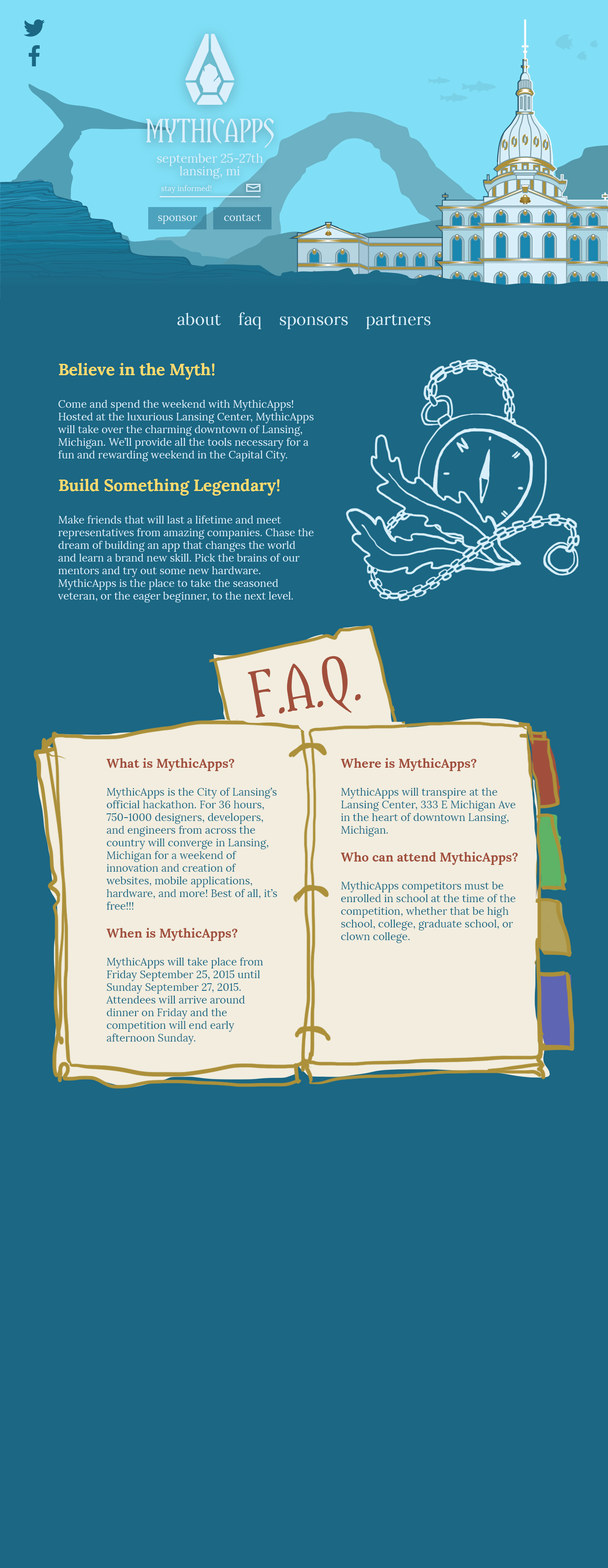
<style>
.page{position:relative;width:608px;height:1568px;background:#1b6784}
.page>*{position:absolute;margin:0}
.t1{font:12.2px/20.7px "Lora-Regular";color:#dcf0fb}
.t2{font:24.3px/20.7px "Yataghan-Regular";color:#dcf0fb}
.t3{font:12.2px/12.8px "Lora-Regular";color:#dcf0fb}
.t4{font:7.6px "Lora-Regular";color:#dcf0fb}
.t5{font:10.6px "Lora-Regular";color:#dcf0fb}
.t6{font:16.5px "Lora-Regular";color:#dcf0fb}
.t7{font:16.5px "Lora-Bold";color:#ffdb6d}
.t8{font:48.6px "Yataghan-Regular";color:#a14f3c}
.t9{font:10.6px "Lora-Regular";color:#1b6784}
.t10{font:12.7px "Lora-Bold";color:#a14f3c}
</style>
<div class="page">
<p class="t1" style="left:146px;top:118px;width:128px;height:61px;text-align:center"><span class="t2">MYTHICAPPS<br></span>september 25-27th<br><span class="t3">lansing, mi</span></p>
<p class="t4" style="left:161px;top:185px;width:51px;height:8px">stay informed!</p>
<p class="t5" style="left:158px;top:215px;width:39px;height:9px">sponsor</p>
<p class="t5" style="left:224px;top:214px;width:38px;height:7px">contact</p>
<p class="t6" style="left:177px;top:312px;width:254px;height:17px">about    faq    sponsors    partners</p>
<p class="t5" style="left:58px;top:363px;width:256px;height:240px"><span class="t7">Believe in the Myth!<br><br></span>Come and spend the weekend with MythicApps! Hosted at the luxurious Lansing Center, MythicApps will take over the charming downtown of Lansing, Michigan. We’ll provide all the tools necessary for a fun and rewarding weekend in the Capital City.<br><br><span class="t7">Build Something Legendary!<br><br></span>Make friends that will last a lifetime and meet representatives from amazing companies. Chase the dream of building an app that changes the world and learn a brand new skill. Pick the brains of our mentors and try out some new hardware. MythicApps is the place to take the seasoned veteran, or the eager beginner, to the next level.</p>
<p class="t8" style="left:248px;top:656px;width:113px;height:62px;rotate:-10deg">F.A.Q.</p>
<p class="t9" style="left:106px;top:758px;width:171px;height:286px"><span class="t10">What is MythicApps?<br><br></span>MythicApps is the City of Lansing’s official hackathon. For 36 hours, 750-1000 designers, developers, and engineers from across the country will converge in Lansing, Michigan for a weekend of innovation and creation of websites, mobile applications, hardware, and more! Best of all, it’s free!!!<br><br><span class="t10">When is MythicApps?<br><br></span>MythicApps will take place from Friday September 25, 2015 until Sunday September 27, 2015. Attendees will arrive around dinner on Friday and the competition will end early afternoon Sunday.</p>
<p class="t9" style="left:341px;top:758px;width:177px;height:185px"><span class="t10">Where is MythicApps?<br><br></span>MythicApps will transpire at the Lansing Center, 333 E Michigan Ave in the heart of downtown Lansing, Michigan.<br><br><span class="t10">Who can attend MythicApps?<br><br></span>MythicApps competitors must be enrolled in school at the time of the competition, whether that be high school, college, graduate school, or clown college.</p>
</div>
